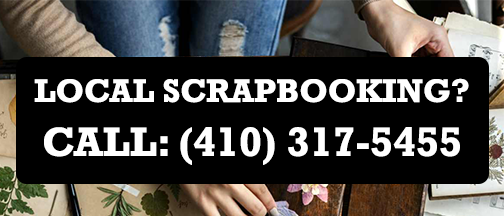
<style>
.page{position:relative;width:504px;height:216px;background:#000000}
.page>*{position:absolute;margin:0}
.t1{font:33.3px "Rockwell-Bold";color:#ffffff}
.t2{font:41.7px "Rockwell-Bold";color:#ffffff}
</style>
<div class="page">
<p class="t1" style="left:34px;top:78px;width:435px;height:25px">LOCAL SCRAPBOOKING?</p>
<p class="t2" style="left:44px;top:127px;width:416px;height:38px">CALL: (410) 317-5455</p>
</div>
